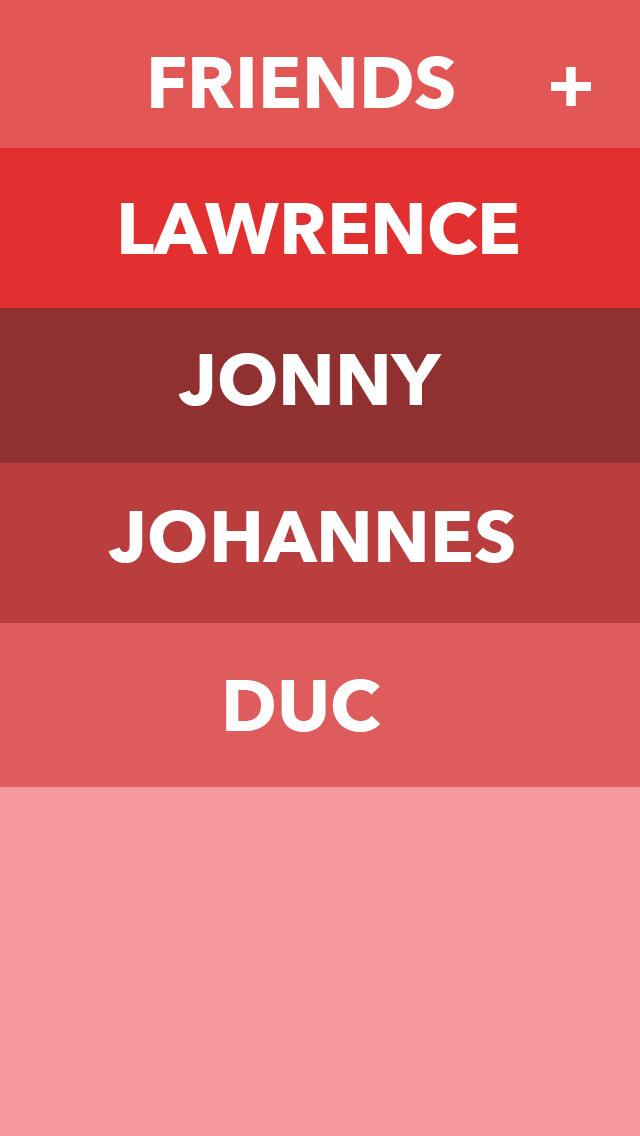
<style>
.page{position:relative;width:640px;height:1136px;background:#f5989d}
.page>*{position:absolute;margin:0}
.t1{font:72px "AvenirNext-Bold";color:#ffffff}
</style>
<div class="page">
<p class="t1" style="left:151px;top:56px;width:440px;height:53px">FRIENDS     +</p>
<p class="t1" style="left:121px;top:202px;width:397px;height:53px">LAWRENCE</p>
<p class="t1" style="left:178px;top:353px;width:264px;height:53px">JONNY</p>
<p class="t1" style="left:108px;top:510px;width:406px;height:53px">JOHANNES</p>
<p class="t1" style="left:226px;top:679px;width:155px;height:53px">DUC</p>
</div>
